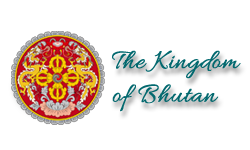
<style>
.page{position:relative;width:250px;height:150px;background:#ffffff}
.page>*{position:absolute;margin:0}
.t1{font:28px "Allura-Regular";color:#03696f;font-weight:bold}
</style>
<div class="page">
<p class="t1" style="left:112px;top:50px;width:129px;height:62px">The Kingdom <br>of Bhutan</p>
</div>
